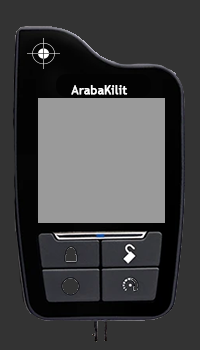
<style>
.page{position:relative;width:200px;height:350px;background:#333333}
.page>*{position:absolute;margin:0}
.t1{font:12px "TrebuchetMS";color:#ffffff;font-weight:bold}
</style>
<div class="page">
<p class="t1" style="left:71px;top:85px;width:57px;height:10px">ArabaKilit</p>
</div>
